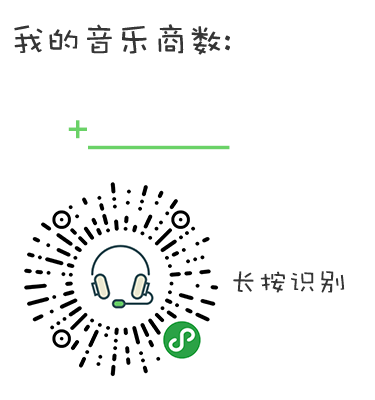
<style>
.page{position:relative;width:375px;height:400px;background:#ffffff}
.page>*{position:absolute;margin:0}
.t1{font:48px "DFWaWaSC-W5";letter-spacing:-0.01em;color:#6ad267}
.t2{font:30px "DFWaWaSC-W5";letter-spacing:-0.01em;color:#353535}
</style>
<div class="page">
<p class="t1" style="left:68px;top:120px;width:162px;height:30px">+______</p>
<p class="t2" style="left:233px;top:271px;width:112px;height:22px">长按识别</p>
</div>
